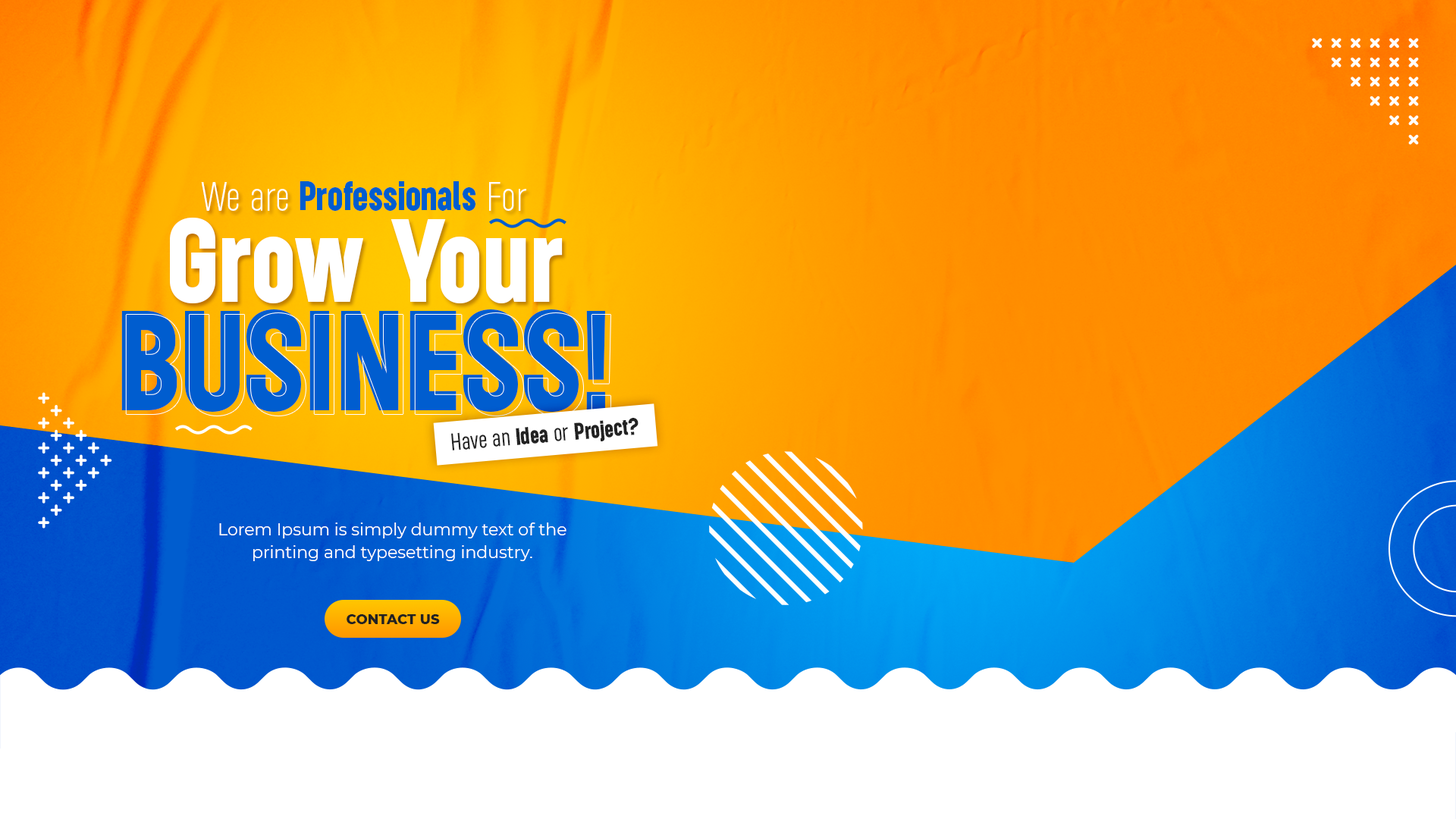
<style>
.page{position:relative;width:1456px;height:819px}
.page>*{position:absolute;margin:0}
.t1{font:44px "Roundkey-ExtraLight";letter-spacing:0.015em;color:#ffffff}
.t2{font:44px "Roundkey-Bold";letter-spacing:0.015em;color:#005dcf}
.t3{font:127.4px "Roundkey-Bold";letter-spacing:0.015em;color:#ffffff}
.t4{font:153.2px "Roundkey-Bold";letter-spacing:0.015em;color:#005dcf;text-transform:uppercase}
.t5{font:25.8px "Roundkey-Bold";letter-spacing:0.015em;color:#222222}
.t6{font:25.8px "Roundkey-Light";letter-spacing:0.015em;color:#222222}
.t7{font:16.7px/22.7px "Montserrat-Regular";color:#ffffff}
.t8{font:13.6px "Montserrat-ExtraBold";color:#222222;text-transform:uppercase}
</style>
<div class="page">
<p class="t1" style="left:201px;top:182px;width:87px;height:29px">We are</p>
<p class="t2" style="left:300px;top:181px;width:175px;height:30px">Professionals</p>
<p class="t1" style="left:489px;top:182px;width:37px;height:29px">For</p>
<p class="t3" style="left:170px;top:218px;width:393px;height:86px">Grow Your</p>
<p class="t4" style="left:121px;top:309px;width:484px;height:103px">Business!</p>
<p class="t4" style="left:126px;top:313px;width:484px;height:103px">Business!</p>
<p class="t5" style="left:451px;top:418px;width:188px;height:32px;rotate:-5deg"><span class="t6">Have an </span>Idea<span class="t6"> or </span>Project?</p>
<p class="t7" style="left:219px;top:522px;width:347px;height:39px;text-align:center">Lorem Ipsum is simply dummy text of the printing and typesetting industry.</p>
<p class="t8" style="left:347px;top:614px;width:93px;height:10px">Contact Us</p>
</div>
